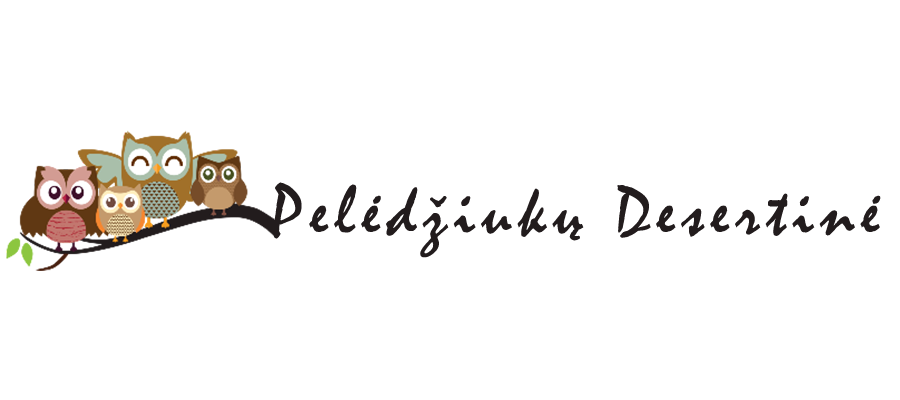
<style>
.page{position:relative;width:900px;height:400px;background:#ffffff}
.page>*{position:absolute;margin:0}
.t1{font:72px "Mistral";letter-spacing:0.1em;color:#221c1d}
</style>
<div class="page">
<p class="t1" style="left:271px;top:182px;width:610px;height:76px">Pelėdžiukų Desertinė</p>
</div>
